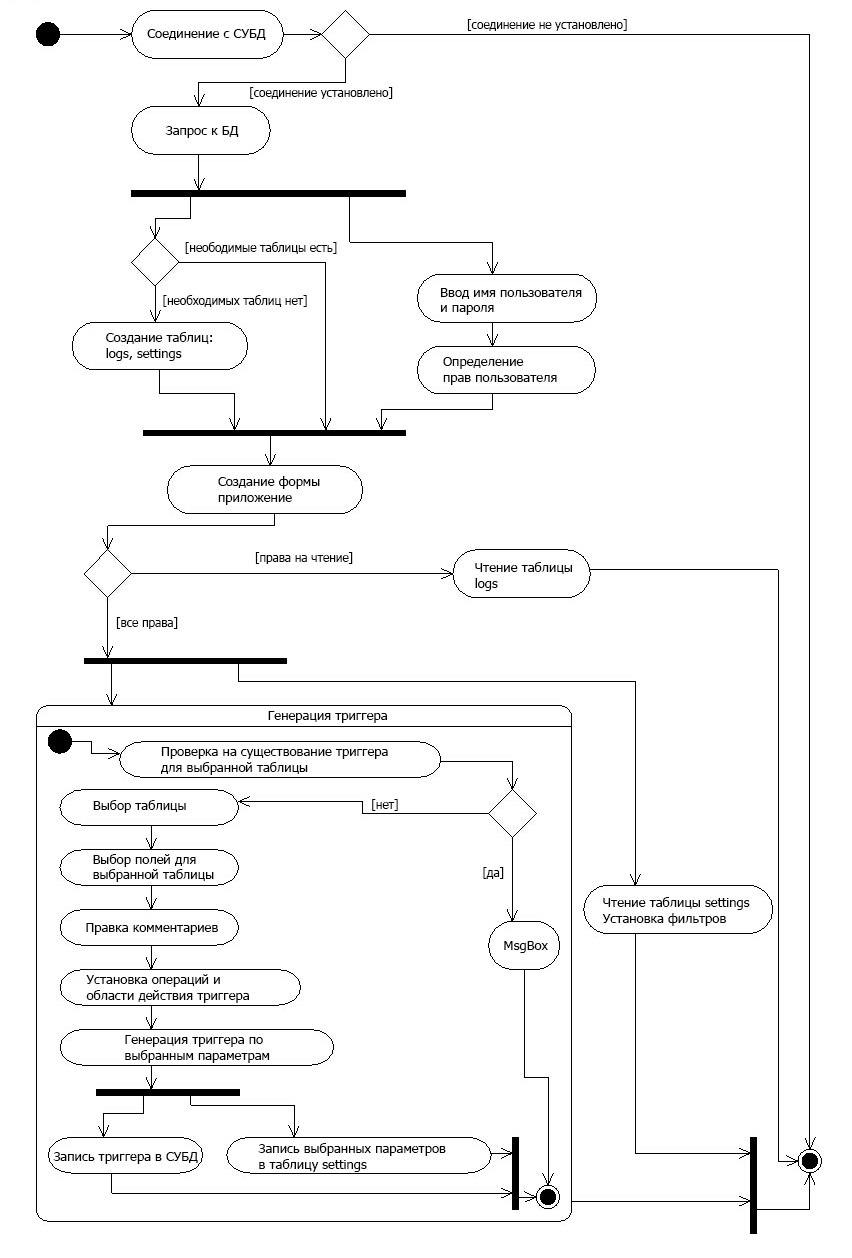
<style>
.page{position:relative;width:852px;height:1258px;background:#ffffff}
.page>*{position:absolute;margin:0}
.t1{font:13.1px "Tahoma";color:#000000}
.t2{font:11.7px "Tahoma";color:#000000}
</style>
<div class="page">
<p class="t1" style="left:147px;top:29px;width:119px;height:11px">Соединение с СУБД</p>
<p class="t2" style="left:467px;top:19px;width:160px;height:12px">[соединение не установлено]</p>
<p class="t2" style="left:250px;top:87px;width:143px;height:12px">[соединение установлено]</p>
<p class="t1" style="left:165px;top:126px;width:74px;height:12px">Запрос к БД</p>
<p class="t2" style="left:185px;top:242px;width:152px;height:12px">[неободимые таблицы есть]</p>
<p class="t1" style="left:441px;top:288px;width:141px;height:27px">Ввод имя пользователя<br>и пароля</p>
<p class="t2" style="left:163px;top:295px;width:144px;height:12px">[необходимых таблиц нет]</p>
<p class="t1" style="left:106px;top:332px;width:106px;height:29px">Создание таблиц:<br>logs, settings</p>
<p class="t1" style="left:443px;top:357px;width:114px;height:28px">Определение<br>прав пользователя</p>
<p class="t1" style="left:218px;top:476px;width:102px;height:29px">Создание формы<br>приложение</p>
<p class="t2" style="left:255px;top:552px;width:98px;height:12px">[права на чтение]</p>
<p class="t1" style="left:475px;top:562px;width:97px;height:29px">Чтение таблицы<br>logs</p>
<p class="t2" style="left:116px;top:617px;width:62px;height:12px">[все права]</p>
<p class="t1" style="left:268px;top:711px;width:119px;height:12px">Генерация триггера</p>
<p class="t1" style="left:161px;top:747px;width:227px;height:28px">Проверка на существование триггера <br>для выбранной таблицы</p>
<p class="t1" style="left:93px;top:800px;width:93px;height:13px">Выбор таблицы</p>
<p class="t2" style="left:372px;top:799px;width:26px;height:12px">[нет]</p>
<p class="t1" style="left:93px;top:854px;width:121px;height:28px">Выбор полей для<br>выбранной таблицы</p>
<p class="t2" style="left:483px;top:867px;width:21px;height:12px">[да]</p>
<p class="t1" style="left:602px;top:897px;width:148px;height:29px">Чтение таблицы settings<br>Установка фильтров</p>
<p class="t1" style="left:86px;top:923px;width:132px;height:12px">Правка комментариев</p>
<p class="t1" style="left:504px;top:941px;width:44px;height:12px">MsgBox</p>
<p class="t1" style="left:86px;top:974px;width:163px;height:29px">Установка операций и<br>области действия триггера</p>
<p class="t1" style="left:125px;top:1035px;width:145px;height:28px">Генерация триггера по<br>выбранным параметрам</p>
<p class="t1" style="left:258px;top:1143px;width:188px;height:29px">Запись выбранных параметров<br>в таблицу settings</p>
<p class="t1" style="left:53px;top:1152px;width:145px;height:12px">Запись триггера в СУБД</p>
</div>
